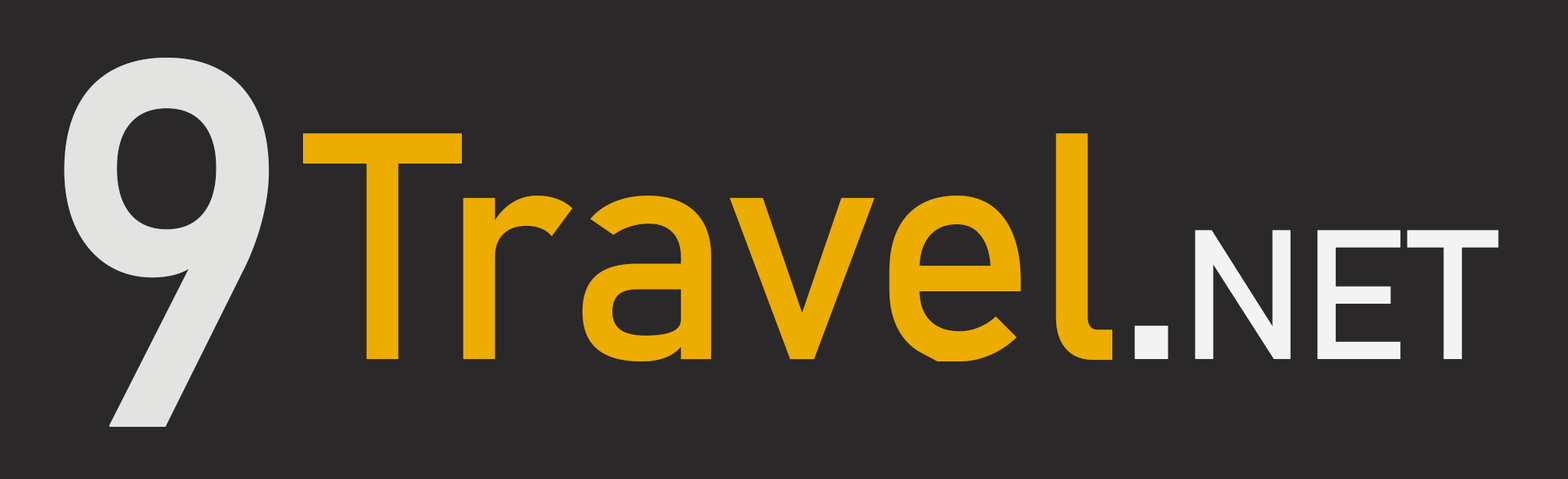
<style>
.page{position:relative;width:1568px;height:479px;background:#2a2828}
.page>*{position:absolute;margin:0}
.t1{font:512.8px "Bahnschrift";letter-spacing:-0.025em;color:#e3e3e2;font-weight:bold}
.t2{font:317.7px "Bahnschrift";letter-spacing:-0.025em;color:#ecac00}
.t3{font:317.7px "Bahnschrift";letter-spacing:-0.025em;color:#f3f3f3}
.t4{font:181.5px "Bahnschrift";letter-spacing:-0.025em;color:#f3f3f3}
</style>
<div class="page">
<p class="t1" style="left:64px;top:58px;width:206px;height:369px">9</p>
<p class="t2" style="left:303px;top:133px;width:1196px;height:228px">Travel<span class="t3">.</span><span class="t4">NET</span></p>
</div>
